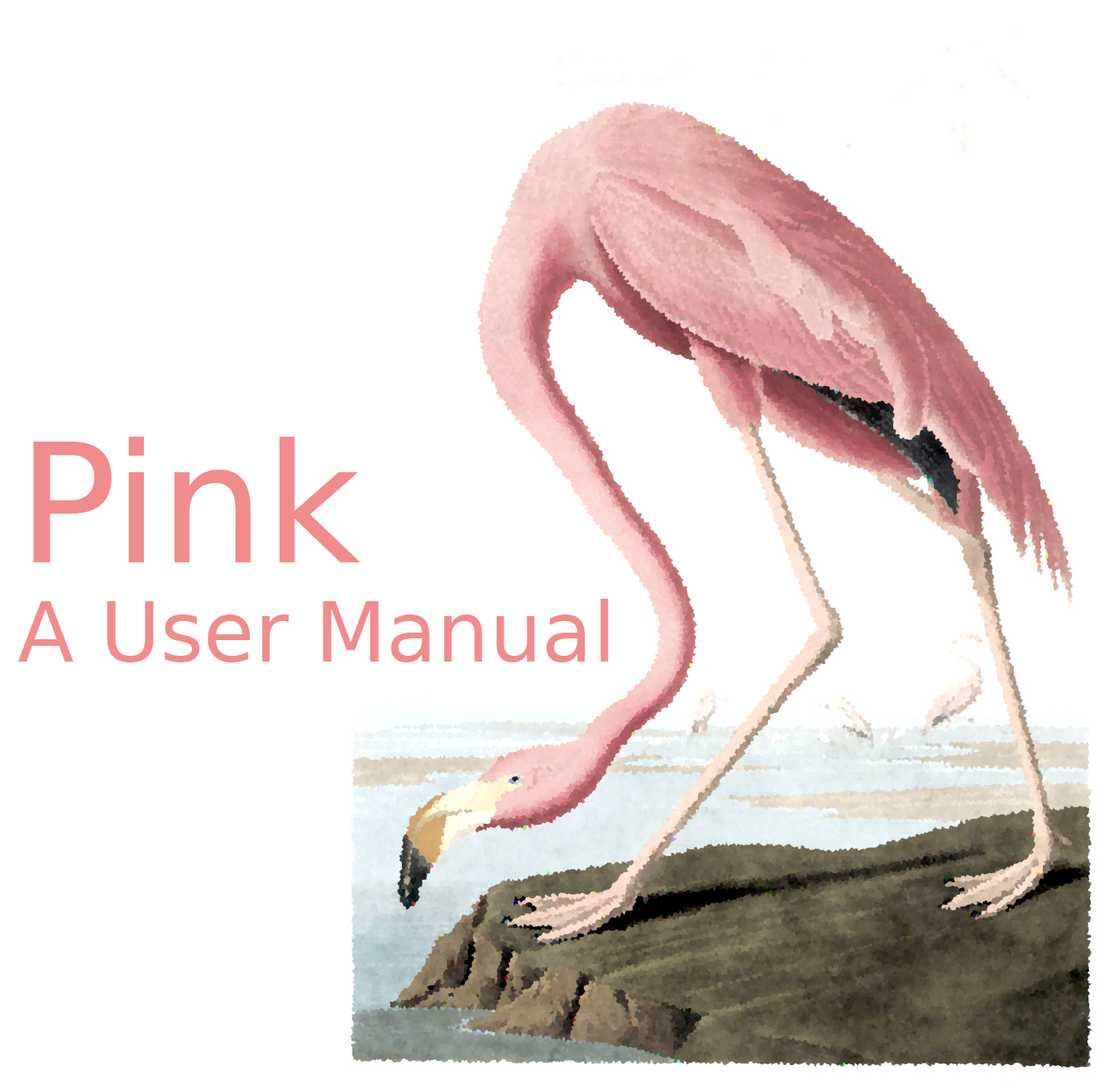
<style>
.page{position:relative;width:1099px;height:1085px;background:#ffffff}
.page>*{position:absolute;margin:0}
.t1{font:82.7px "BitstreamVeraSans-Roman";color:#f18c8c}
.t2{font:165.4px "BitstreamVeraSans-Roman";color:#f18c8c}
</style>
<div class="page">
<p class="t1" style="left:17px;top:437px;width:592px;height:225px"><span class="t2">Pink<br></span>A User Manual</p>
</div>
